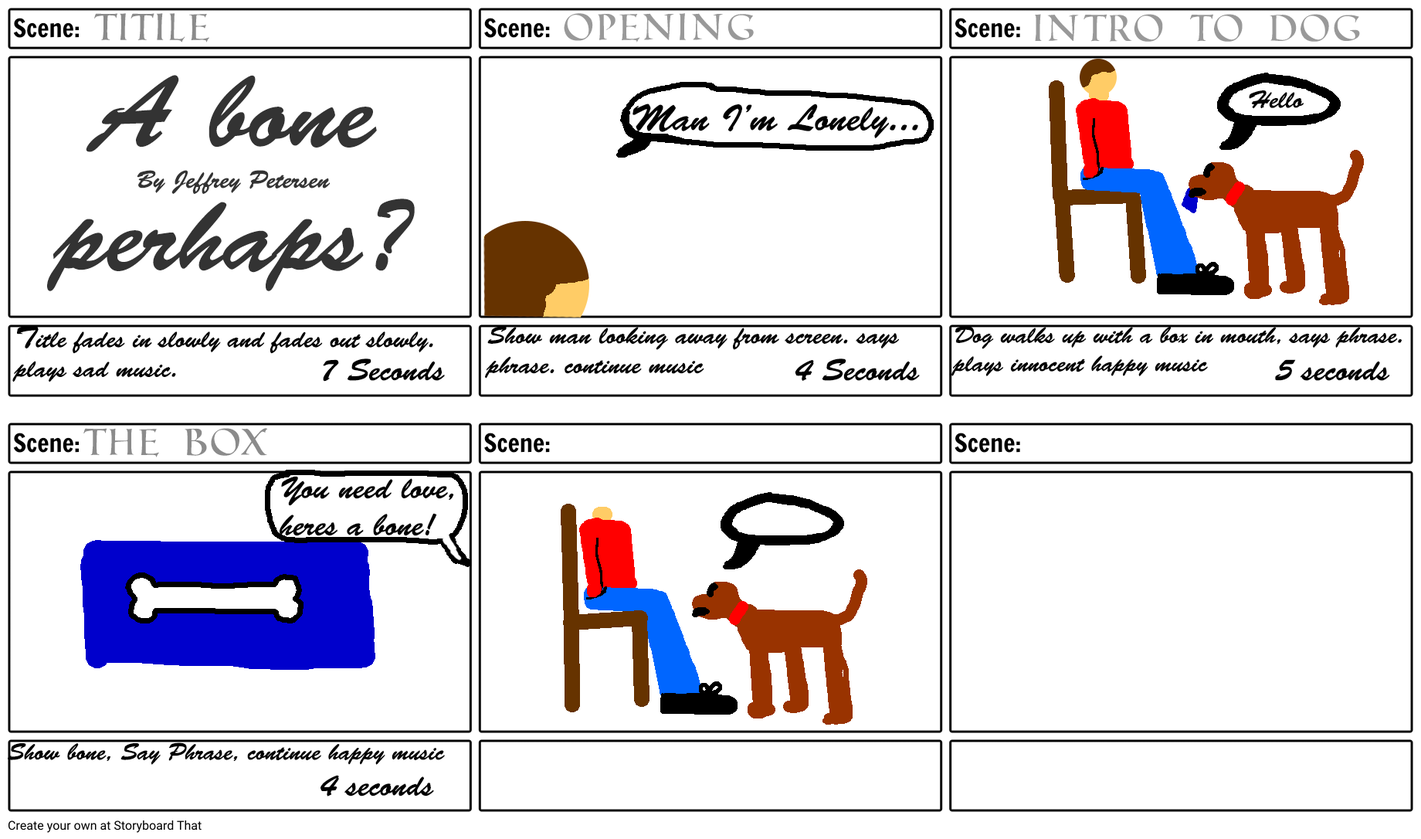
<style>
.page{position:relative;width:1421px;height:839px;background:#ffffff}
.page>*{position:absolute;margin:0}
.t1{font:37.1px "RomanSD";color:#8b8b8b}
.t2{font:37.1px "RomanSD";color:#999999}
.t3{font:103px "BrushScriptStd";color:#333333}
.t4{font:24.7px "BrushScriptStd";color:#000000}
.t5{font:37.1px "BrushScriptStd";color:#000000}
.t6{font:24.7px "BrushScriptStd";color:#333333}
.t7{font:30.9px "BrushScriptStd";color:#000000}
.t8{font:23.7px "BrushScriptStd";color:#000000}
</style>
<div class="page">
<p class="t1" style="left:94px;top:13px;width:115px;height:29px">Titile</p>
<p class="t2" style="left:564px;top:13px;width:190px;height:29px">opening</p>
<p class="t2" style="left:1035px;top:14px;width:325px;height:28px">Intro to DOG</p>
<p class="t3" style="left:47px;top:75px;width:368px;height:216px;text-align:center">A bone<br>perhaps?</p>
<p class="t4" style="left:1249px;top:90px;width:55px;height:19px">Hello</p>
<p class="t5" style="left:633px;top:104px;width:285px;height:34px">Man I’m Lonely...</p>
<p class="t6" style="left:137px;top:170px;width:194px;height:24px">By Jeffrey Petersen</p>
<p class="t4" style="left:12px;top:325px;width:421px;height:57px"><span class="t7">T</span>itle fades in slowly and fades out slowly. plays sad music.</p>
<p class="t4" style="left:485px;top:326px;width:414px;height:53px">Show man looking away from screen. says phrase. continue music</p>
<p class="t8" style="left:952px;top:326px;width:450px;height:50px">Dog walks up with a box in mouth, says phrase. plays innocent happy music</p>
<p class="t7" style="left:323px;top:358px;width:122px;height:24px">7 Seconds</p>
<p class="t7" style="left:795px;top:358px;width:125px;height:23px">4 Seconds</p>
<p class="t7" style="left:1275px;top:359px;width:115px;height:22px">5 seconds</p>
<p class="t1" style="left:83px;top:428px;width:185px;height:29px">The box</p>
<p class="t7" style="left:280px;top:476px;width:174px;height:60px">You need love, heres a bone!</p>
<p class="t8" style="left:8px;top:742px;width:437px;height:23px">Show bone, Say Phrase, continue happy music</p>
<p class="t7" style="left:321px;top:775px;width:113px;height:21px">4 seconds</p>
</div>
